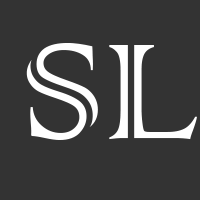
<style>
.page{position:relative;width:200px;height:200px;background:#333333}
.page>*{position:absolute;margin:0}
.t1{font:179.7px "ColonnaMT";color:#ffffff}
</style>
<div class="page">
<p class="t1" style="left:26px;top:43px;width:171px;height:97px">SL</p>
</div>
